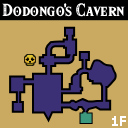
<style>
.page{position:relative;width:128px;height:128px;background:#c9aa60}
.page>*{position:absolute;margin:0}
.t1{font:15.5px "HyliaSerifBeta-Regular";color:#ffffff}
</style>
<div class="page">
<p class="t1" style="left:2px;top:3px;width:123px;height:14px">Dodongo's Cavern</p>
</div>
